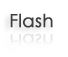
<style>
.page{position:relative;width:68px;height:57px;background:#ffffff}
.page>*{position:absolute;margin:0}
.t1{font:18px "CenturyGothic";letter-spacing:-0.005em;color:#3e3e3e;font-weight:bold}
.t2{font:18px "CenturyGothic";letter-spacing:-0.005em;color:#ededed;font-weight:bold}
</style>
<div class="page">
<p class="t1" style="left:10px;top:13px;width:43px;height:15px">Flash</p>
<p class="t2" style="left:10px;top:33px;width:43px;height:15px">Flash</p>
</div>
